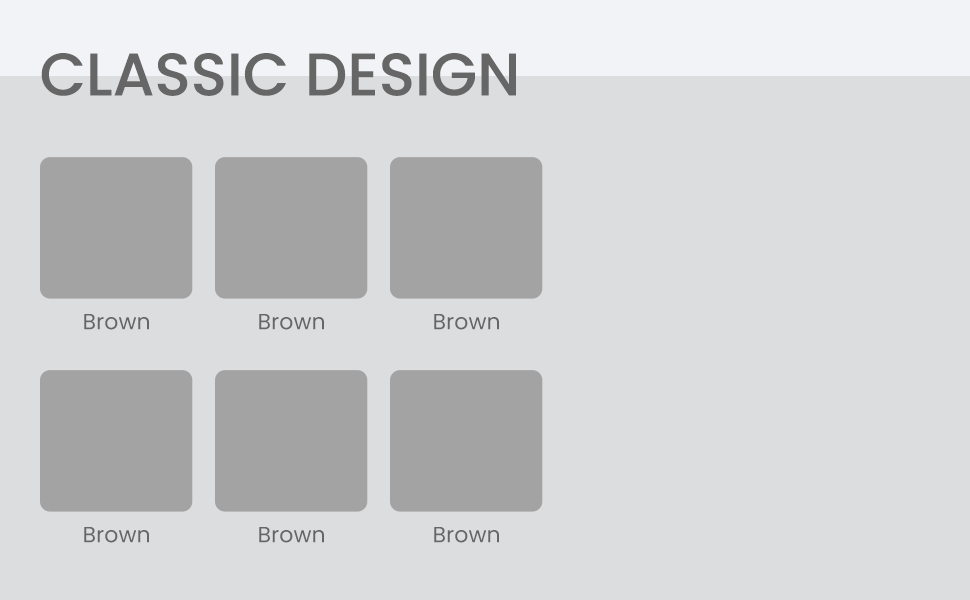
<style>
.page{position:relative;width:970px;height:600px;background:#dcdddf}
.page>*{position:absolute;margin:0}
.t1{font:60px "Poppins-Medium";color:#666666;text-transform:uppercase}
.t2{font:22px "Poppins-Regular";color:#666666}
</style>
<div class="page">
<p class="t1" style="left:41px;top:53px;width:475px;height:43px">CLASSIC DESIGN</p>
<p class="t2" style="left:84px;top:314px;width:65px;height:16px">Brown</p>
<p class="t2" style="left:259px;top:314px;width:65px;height:16px">Brown</p>
<p class="t2" style="left:434px;top:314px;width:65px;height:16px">Brown</p>
<p class="t2" style="left:84px;top:527px;width:65px;height:16px">Brown</p>
<p class="t2" style="left:259px;top:527px;width:65px;height:16px">Brown</p>
<p class="t2" style="left:434px;top:527px;width:65px;height:16px">Brown</p>
</div>
